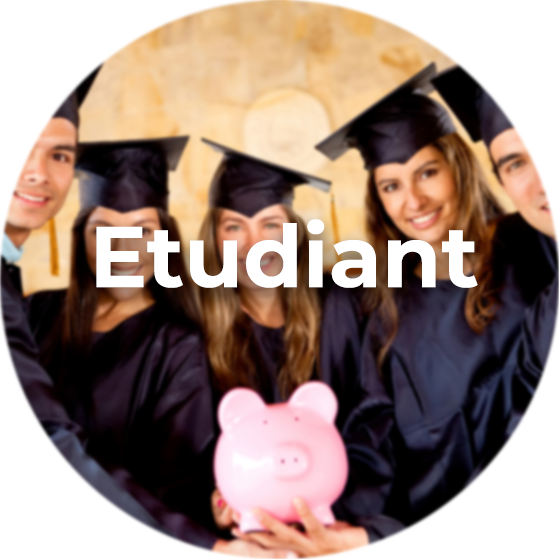
<style>
.page{position:relative;width:559px;height:559px;background:#ffffff}
.page>*{position:absolute;margin:0}
.t1{font:86.1px "Montserrat-Bold";color:#ffffff}
</style>
<div class="page">
<p class="t1" style="left:96px;top:219px;width:382px;height:69px">Etudiant</p>
</div>
